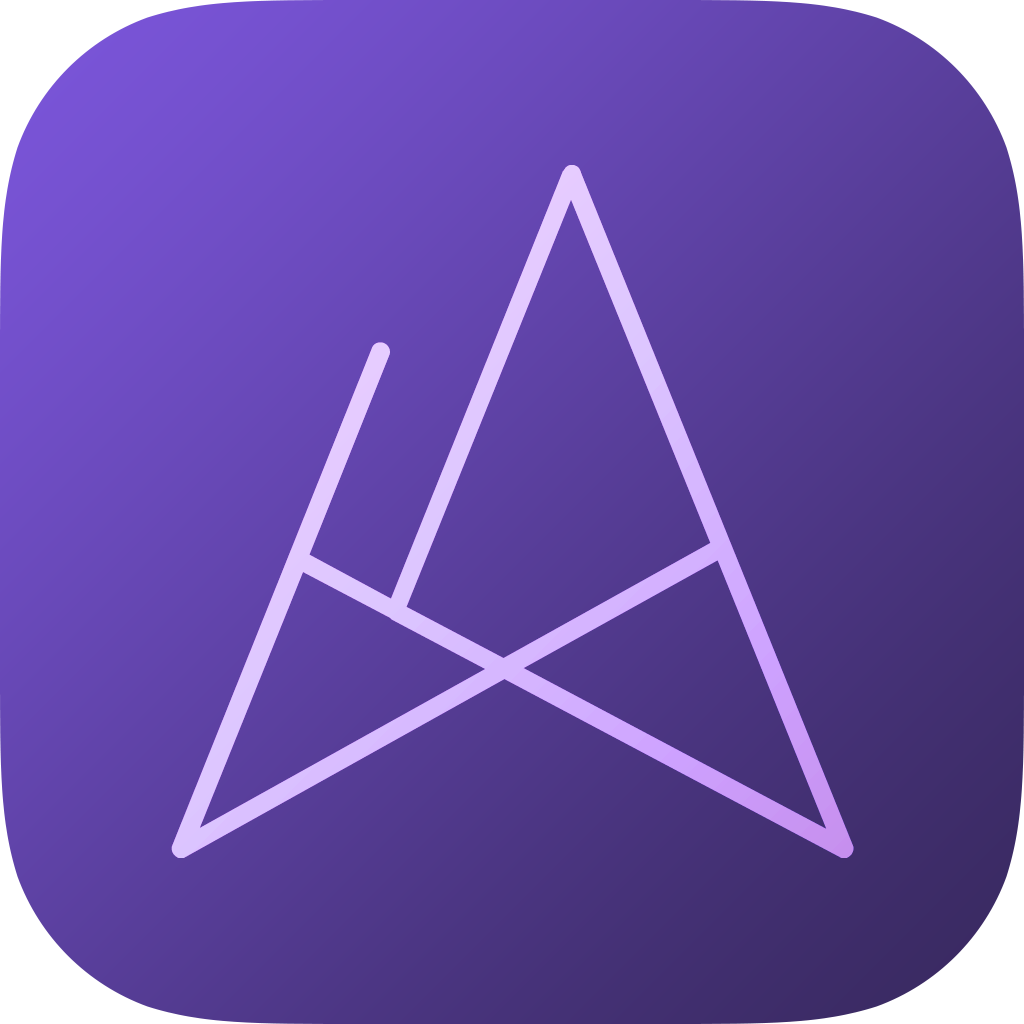
<style>
.page{position:relative;width:1024px;height:1024px}
.page>*{position:absolute;margin:0}
.t1{font:900px "Metrica-Regular";letter-spacing:0.05em;color:#dac0ff}
</style>
<div class="page">
<p class="t1" style="left:171px;top:165px;width:683px;height:693px">A</p>
<p class="t1" style="left:171px;top:165px;width:683px;height:693px">A</p>
</div>
